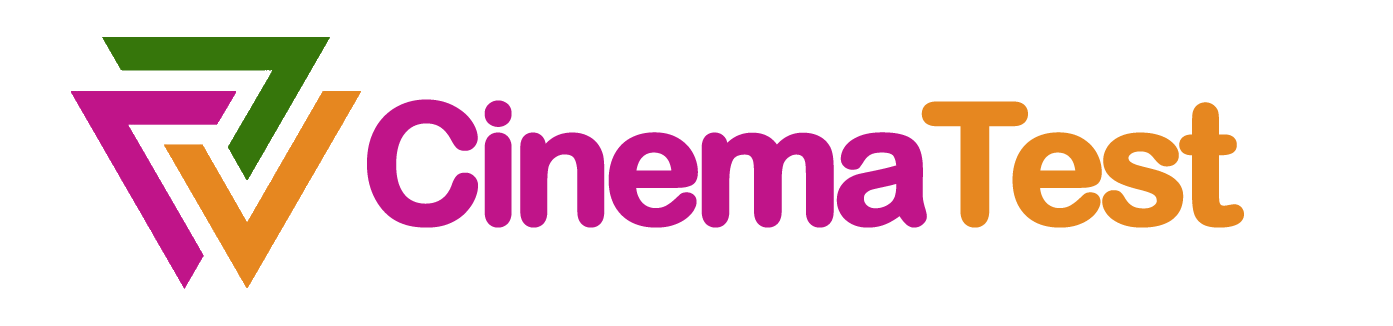
<style>
.page{position:relative;width:1393px;height:326px;background:#ffffff}
.page>*{position:absolute;margin:0}
.t1{font:166.7px "ArialRoundedMTBold";letter-spacing:-0.08em;color:#c01489;font-weight:bold}
.t2{font:166.7px "ArialRoundedMTBold";letter-spacing:-0.08em;color:#e68720;font-weight:bold}
</style>
<div class="page">
<p class="t1" style="left:367px;top:99px;width:877px;height:129px">Cinema<span class="t2">Test</span></p>
</div>
